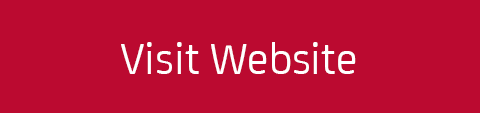
<style>
.page{position:relative;width:480px;height:113px;background:#bb0a30}
.page>*{position:absolute;margin:0}
.t1{font:47px "FS-Joey";color:#ffffff}
</style>
<div class="page">
<p class="t1" style="left:121px;top:42px;width:235px;height:32px">Visit Website</p>
</div>
